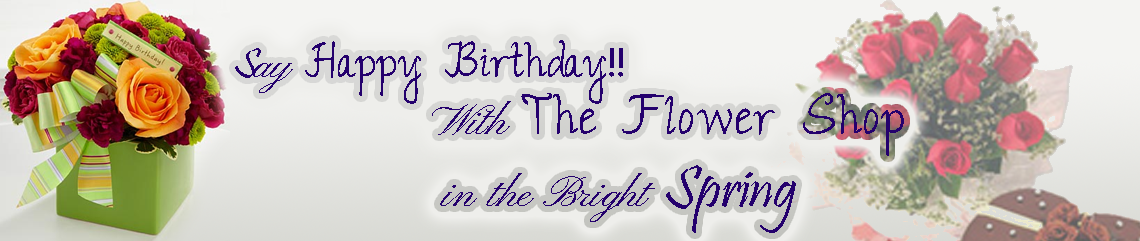
<style>
.page{position:relative;width:1140px;height:241px}
.page>*{position:absolute;margin:0}
.t1{font:48px "JandaRomantic";color:#24006d}
.t2{font:42.5px "Pristina-Regular";color:#24006d}
.t3{font:42.5px "PinyonScript";color:#24006d}
.t4{font:42.5px "JandaRomantic";color:#24006d}
.t5{font:42.5px "MyriadPro-Regular";color:#24006d}
.t6{font:60px "Pristina-Regular";color:#24006d}
</style>
<div class="page">
<p class="t1" style="left:235px;top:40px;width:669px;height:193px;text-align:center"><span class="t2">S</span><span class="t3">ay </span><span class="t4">Happy Birthday</span><span class="t5">!! <br></span><span class="t3">With </span>The Flower Shop<br><span class="t3">in the Bright </span><span class="t6">Spring</span></p>
</div>
